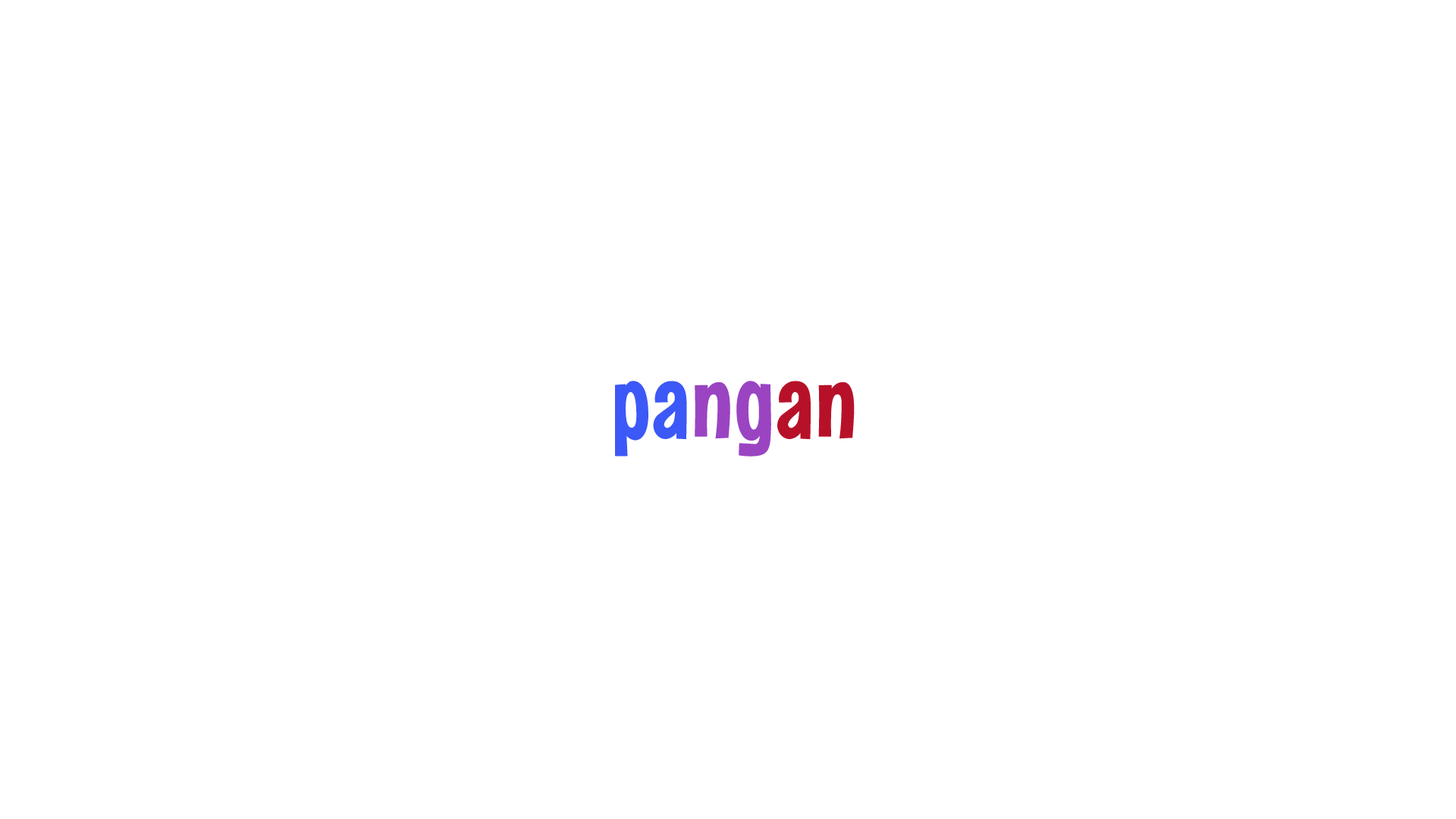
<style>
.page{position:relative;width:1456px;height:819px;background:#ffffff}
.page>*{position:absolute;margin:0}
.t1{font:105.3px "MouseMemoirs-Regular";color:#3c58f6;font-weight:bold}
.t2{font:105.3px "MouseMemoirs-Regular";color:#9a44c2;font-weight:bold}
.t3{font:105.3px "MouseMemoirs-Regular";color:#b71129;font-weight:bold}
</style>
<div class="page">
<p class="t1" style="left:615px;top:381px;width:240px;height:76px">pa<span class="t2">ng</span><span class="t3">an</span></p>
</div>
